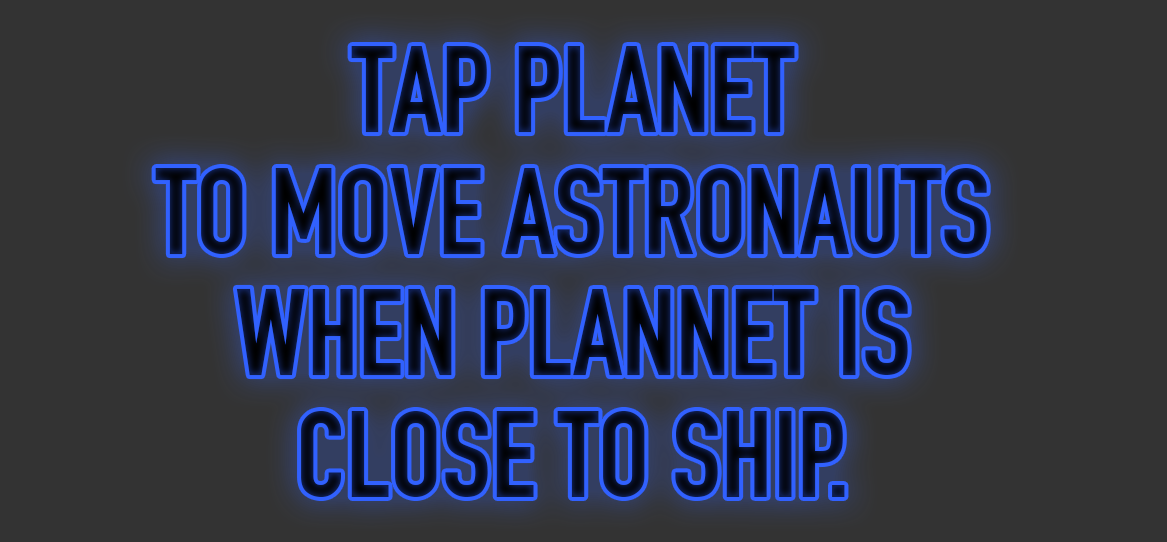
<style>
.page{position:relative;width:1167px;height:542px;background:#333333}
.page>*{position:absolute;margin:0}
.t1{font:120.8px/121.4px "DINEngschrift";color:#070d23;text-transform:uppercase}
</style>
<div class="page">
<p class="t1" style="left:155px;top:46px;width:832px;height:451px;text-align:center">Tap planet <br>to move astronautS when plannet is <br>close to ship.</p>
</div>
